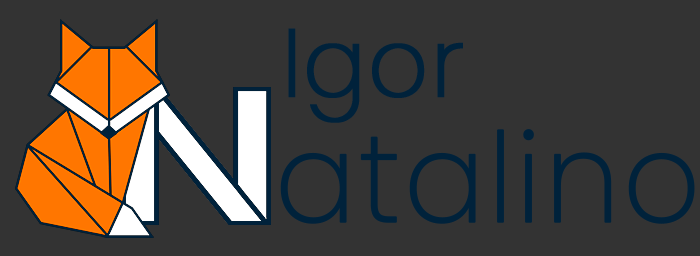
<style>
.page{position:relative;width:700px;height:256px;background:#333333}
.page>*{position:absolute;margin:0}
.t1{font:96px "Poppins-ExtraLight";color:#00223b;font-weight:bold;scale:0.96 1}
.t2{font:124.2px "Poppins-ExtraLight";color:#00223b;font-weight:bold;scale:0.96 1}
</style>
<div class="page">
<p class="t1" style="left:288px;top:28px;width:175px;height:95px">Igor</p>
<p class="t2" style="left:280px;top:129px;width:415px;height:95px">atalino</p>
</div>
